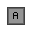
<style>
.page{position:relative;width:32px;height:32px;background:#ffffff}
.page>*{position:absolute;margin:0}
.t1{font:8px "KenPixel";color:#010101}
</style>
<div class="page">
<p class="t1" style="left:13px;top:12px;width:5px;height:7px">A</p>
</div>
